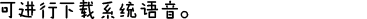
<style>
.page{position:relative;width:367px;height:19px;background:#ffffff}
.page>*{position:absolute;margin:0}
.t1{font:22px "¢è?";color:#000000}
</style>
<div class="page">
<p class="t1" style="left:0px;top:0px;width:189px;height:20px">可进行下载系统语音。</p>
</div>
